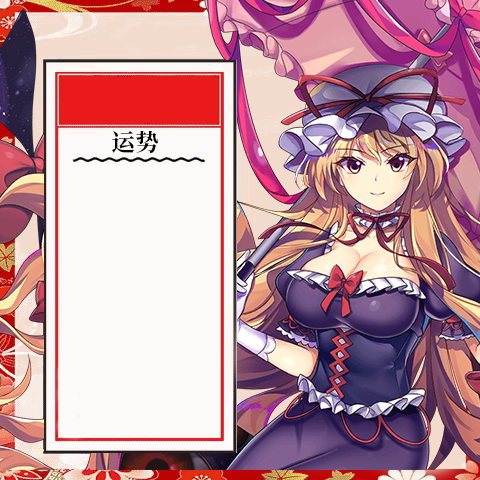
<style>
.page{position:relative;width:480px;height:480px;background:#fcfaf9}
.page>*{position:absolute;margin:0}
.t1{font:24px "NotoSerifSC-Bold";color:#000000}
</style>
<div class="page">
<p class="t1" style="left:112px;top:130px;width:46px;height:23px">运势</p>
</div>
